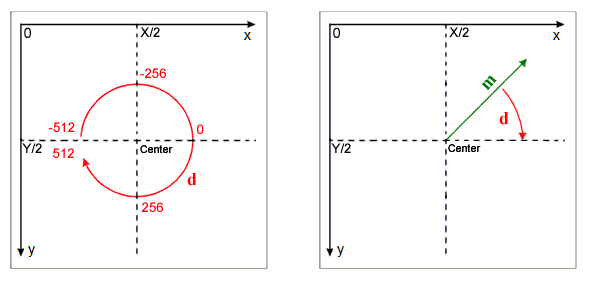
<style>
.page{position:relative;width:600px;height:284px;background:#ffffff}
.page>*{position:absolute;margin:0}
.t1{font:14.7px "ArialMT";color:#000000}
.t2{font:13.3px "ArialMT";color:#000000}
.t3{font:13.3px "ArialMT";color:#ff0000}
.t4{font:18px "TimesNewRomanPS-BoldMT";color:#057806}
.t5{font:18px "TimesNewRomanPS-BoldMT";color:#ff0000}
.t6{font:10.7px "ArialMT";color:#000000}
</style>
<div class="page">
<p class="t1" style="left:24px;top:27px;width:7px;height:11px">0</p>
<p class="t2" style="left:140px;top:27px;width:20px;height:10px">X/2</p>
<p class="t1" style="left:333px;top:27px;width:7px;height:11px">0</p>
<p class="t2" style="left:449px;top:27px;width:20px;height:10px">X/2</p>
<p class="t3" style="left:140px;top:68px;width:26px;height:10px">-256</p>
<p class="t4" style="left:481px;top:76px;width:16px;height:15px;rotate:-49deg">m</p>
<p class="t5" style="left:499px;top:112px;width:10px;height:13px">d</p>
<p class="t3" style="left:48px;top:122px;width:27px;height:10px">-512</p>
<p class="t3" style="left:197px;top:124px;width:7px;height:10px">0</p>
<p class="t2" style="left:22px;top:143px;width:20px;height:10px">Y/2</p>
<p class="t3" style="left:53px;top:148px;width:21px;height:10px">512</p>
<p class="t6" style="left:140px;top:145px;width:33px;height:8px">Center</p>
<p class="t2" style="left:331px;top:143px;width:20px;height:10px">Y/2</p>
<p class="t6" style="left:448px;top:144px;width:33px;height:8px">Center</p>
<p class="t5" style="left:187px;top:173px;width:10px;height:13px">d</p>
<p class="t3" style="left:142px;top:202px;width:21px;height:10px">256</p>
</div>
